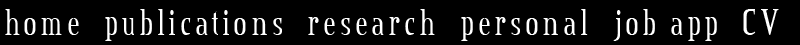
<style>
.page{position:relative;width:800px;height:45px;background:#000000}
.page>*{position:absolute;margin:0}
.t1{font:40px "CreditValley";letter-spacing:0.1em;color:#ffffff;scale:0.83 1}
</style>
<div class="page">
<p class="t1" style="left:5px;top:9px;width:774px;height:32px">home  publications  research  personal  job app  CV</p>
</div>
